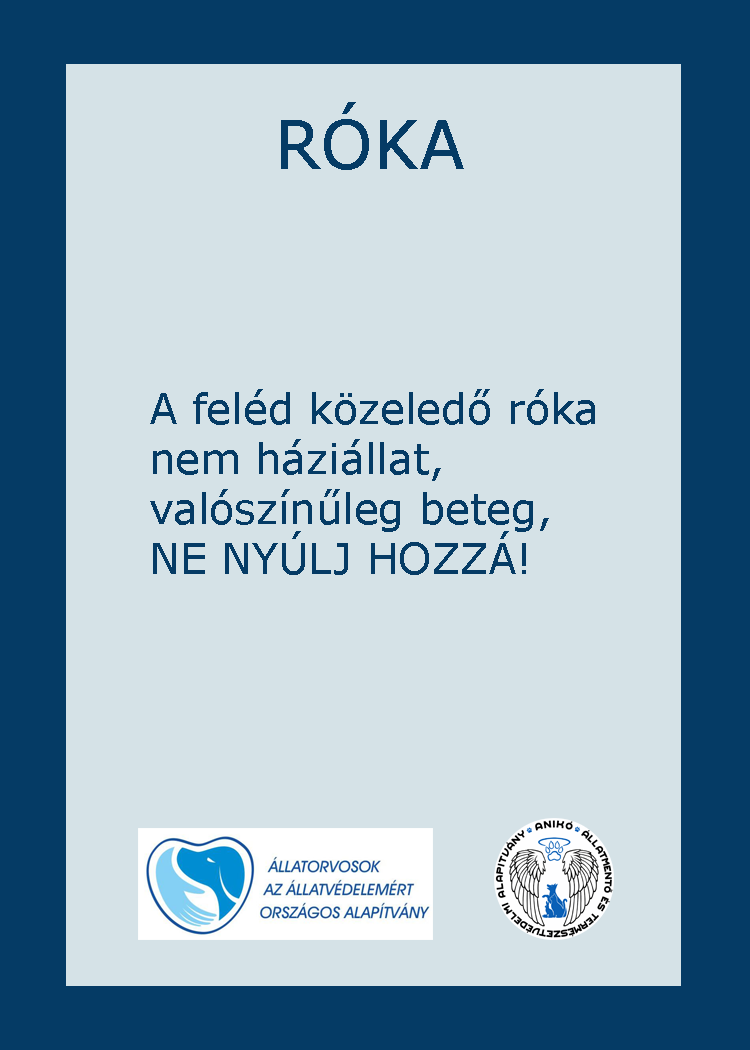
<style>
.page{position:relative;width:750px;height:1050px;background:#d5e2e7}
.page>*{position:absolute;margin:0}
.t1{font:66.7px "Verdana";color:#053b65}
.t2{font:66.7px "GravitateBRK";color:#053b65}
.t3{font:41.7px "Verdana";color:#053b65}
</style>
<div class="page">
<p class="t1" style="left:281px;top:102px;width:183px;height:68px"><span class="t2">         </span>RÓKA</p>
<p class="t3" style="left:150px;top:389px;width:445px;height:186px">A feléd közeledő róka<br>nem háziállat,<br>valószínűleg beteg,<br>NE NYÚLJ HOZZÁ!</p>
</div>
